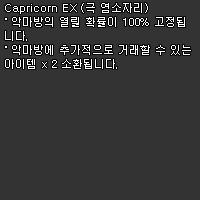
<style>
.page{position:relative;width:200px;height:200px;background:#333333}
.page>*{position:absolute;margin:0}
.t1{font:11px/14px "Dotum";color:#ffffff}
</style>
<div class="page">
<p class="t1" style="left:5px;top:3px;width:186px;height:66px">Capricorn EX (극 염소자리)<br>˚ 악마방의 열릴 확률이 100% 고정됩<br>니다.<br>˚ 악마방에 추가적으로 거래할 수 있는<br>아이템 x 2 소환됩니다.</p>
</div>
